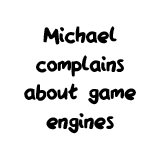
<style>
.page{position:relative;width:160px;height:160px;background:#ffffff}
.page>*{position:absolute;margin:0}
.t1{font:23.9px "QAReports";color:#000000}
</style>
<div class="page">
<p class="t1" style="left:24px;top:26px;width:112px;height:108px;text-align:center">Michael<br>complains<br>about game<br>engines</p>
</div>
